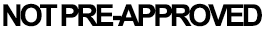
<style>
.page{position:relative;width:280px;height:30px;background:#ffffff}
.page>*{position:absolute;margin:0}
.t1{font:30px "Arial-BoldMT";letter-spacing:-0.11em;color:#000000}
</style>
<div class="page">
<p class="t1" style="left:3px;top:3px;width:259px;height:24px">NOT PRE-APPROVED</p>
</div>
